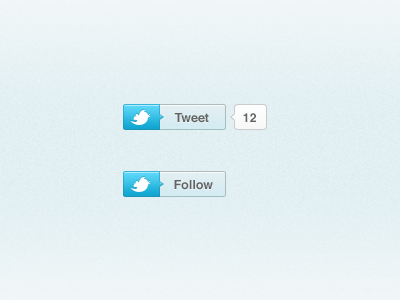
<style>
.page{position:relative;width:400px;height:300px}
.page>*{position:absolute;margin:0}
.t1{font:12.5px "Helvetica-Bold";color:#636363}
</style>
<div class="page">
<p class="t1" style="left:174px;top:113px;width:35px;height:10px">Tweet</p>
<p class="t1" style="left:243px;top:113px;width:13px;height:9px">12</p>
<p class="t1" style="left:174px;top:180px;width:39px;height:10px">Follow</p>
</div>
